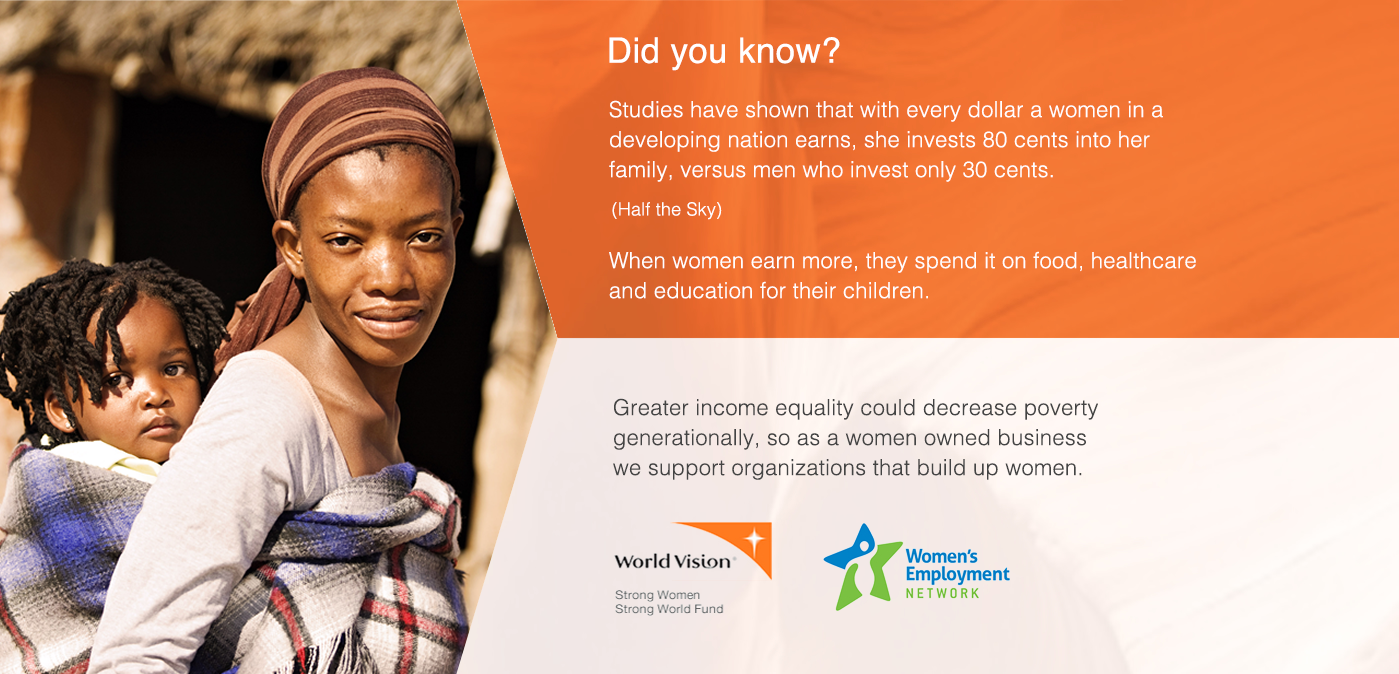
<style>
.page{position:relative;width:1399px;height:674px}
.page>*{position:absolute;margin:0}
.t1{font:35px "Helvetica";letter-spacing:0.01em;color:#ffffff}
.t2{font:22px/30px "Helvetica-Light";letter-spacing:0.01em;color:#ffffff}
.t3{font:18px "Helvetica-Light";letter-spacing:0.01em;color:#ffffff}
.t4{font:22px/30px "Helvetica-Light";letter-spacing:0.01em;color:#444444}
</style>
<div class="page">
<p class="t1" style="left:609px;top:37px;width:231px;height:34px">Did you know?</p>
<p class="t2" style="left:609px;top:100px;width:554px;height:82px">Studies have shown that with every dollar a women in a<br>developing nation earns, she invests 80 cents into her<br>family, versus men who invest only 30 cents.</p>
<p class="t3" style="left:612px;top:202px;width:110px;height:18px">(Half the Sky)</p>
<p class="t2" style="left:609px;top:251px;width:587px;height:48px">When women earn more, they spend it on food, healthcare<br>and education for their children.</p>
<p class="t4" style="left:613px;top:398px;width:485px;height:82px">Greater income equality could decrease poverty<br>generationally, so as a women owned business<br>we support organizations that build up women.</p>
</div>
